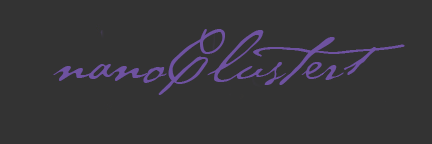
<style>
.page{position:relative;width:432px;height:144px;background:#333333}
.page>*{position:absolute;margin:0}
.t1{font:72px "P22CezanneRegular";color:#6e52a0}
</style>
<div class="page">
<p class="t1" style="left:53px;top:29px;width:352px;height:66px">nanoCluster1</p>
</div>
